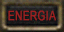
<style>
.page{position:relative;width:64px;height:32px}
.page>*{position:absolute;margin:0}
.t1{font:13.1px "ArialMT";letter-spacing:0.025em;color:#9e2020;font-weight:bold;scale:0.76 1}
</style>
<div class="page">
<p class="t1" style="left:8px;top:10px;width:48px;height:11px">ENERGIA</p>
</div>
